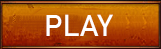
<style>
.page{position:relative;width:161px;height:49px}
.page>*{position:absolute;margin:0}
.t1{font:30px "Bahnschrift";color:#ffffff}
</style>
<div class="page">
<p class="t1" style="left:46px;top:14px;width:67px;height:22px">PLAY</p>
</div>
